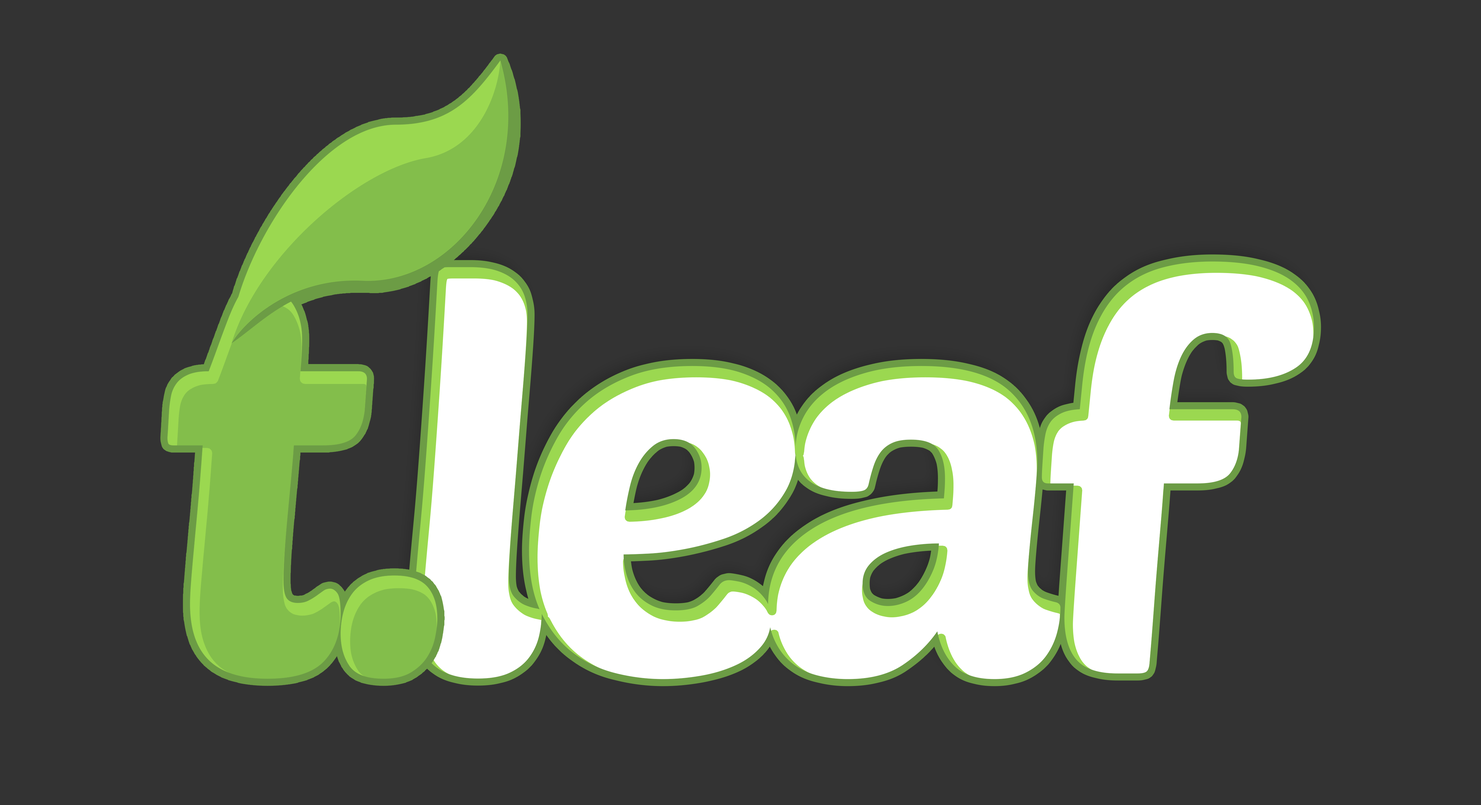
<style>
.page{position:relative;width:1481px;height:805px;background:#333333}
.page>*{position:absolute;margin:0}
.t1{font:549.3px "PoetsenOne-Regular";letter-spacing:-0.08em;color:#ffffff}
</style>
<div class="page">
<p class="t1" style="left:414px;top:262px;width:900px;height:418px">leaf</p>
</div>
